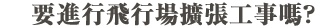
<style>
.page{position:relative;width:336px;height:27px;background:#ffffff}
.page>*{position:absolute;margin:0}
.t1{font:24px "RyuminPr6N-ExBold";color:#4b4742;font-weight:bold}
</style>
<div class="page">
<p class="t1" style="left:32px;top:2px;width:283px;height:24px">要進行飛行場擴張工事嗎?</p>
</div>
